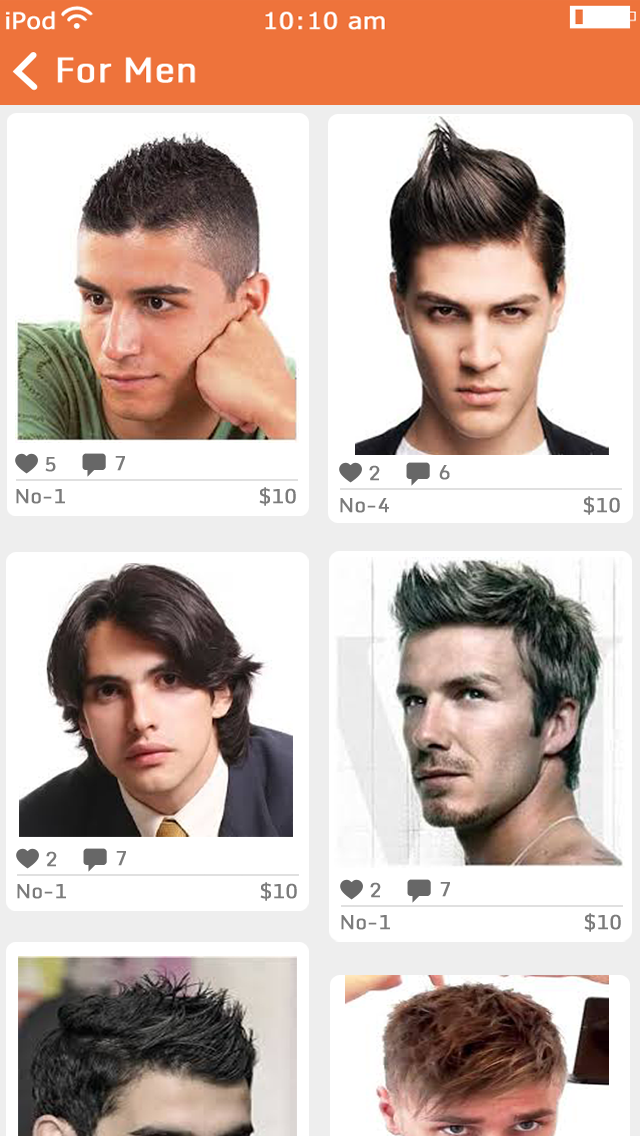
<style>
.page{position:relative;width:640px;height:1136px;background:#ffffff}
.page>*{position:absolute;margin:0}
.t1{font:20px "Monda-Regular";color:#7b7b7b;font-weight:bold}
</style>
<div class="page">
<p class="t1" style="left:45px;top:457px;width:11px;height:15px">5</p>
<p class="t1" style="left:115px;top:456px;width:10px;height:15px">7</p>
<p class="t1" style="left:369px;top:465px;width:11px;height:16px">2</p>
<p class="t1" style="left:439px;top:465px;width:11px;height:15px">6</p>
<p class="t1" style="left:16px;top:487px;width:280px;height:19px">No-1                                $10</p>
<p class="t1" style="left:340px;top:496px;width:280px;height:19px">No-4                                $10</p>
<p class="t1" style="left:46px;top:851px;width:11px;height:16px">2</p>
<p class="t1" style="left:116px;top:851px;width:10px;height:15px">7</p>
<p class="t1" style="left:17px;top:882px;width:280px;height:19px">No-1                                $10</p>
<p class="t1" style="left:370px;top:882px;width:11px;height:16px">2</p>
<p class="t1" style="left:440px;top:882px;width:10px;height:15px">7</p>
<p class="t1" style="left:341px;top:913px;width:280px;height:19px">No-1                                $10</p>
</div>
